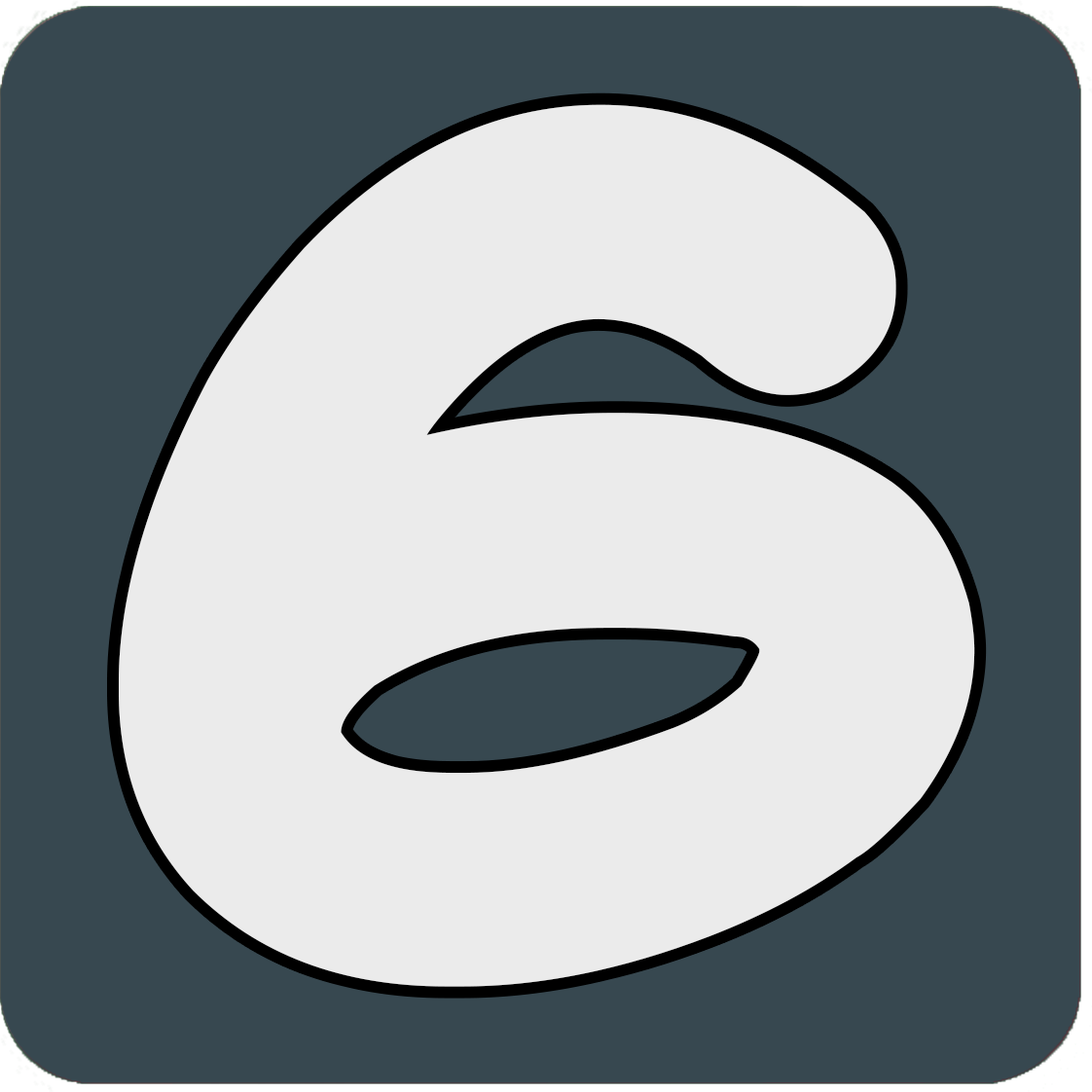
<style>
.page{position:relative;width:1092px;height:1092px;background:#374850}
.page>*{position:absolute;margin:0}
.t1{font:1362.5px "CARTOONIC";color:#ebebeb}
</style>
<div class="page">
<p class="t1" style="left:119px;top:104px;width:856px;height:883px">6</p>
</div>
